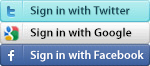
<style>
.page{position:relative;width:150px;height:66px}
.page>*{position:absolute;margin:0}
.t1{font:12px "MyriadPro-Semibold";color:#174555}
.t2{font:12px "MyriadPro-Semibold";color:#000000}
.t3{font:12px "MyriadPro-Semibold";color:#ffffff}
</style>
<div class="page">
<p class="t1" style="left:30px;top:5px;width:100px;height:12px">Sign in with Twitter</p>
<p class="t2" style="left:30px;top:27px;width:102px;height:12px">Sign in with Google</p>
<p class="t3" style="left:30px;top:50px;width:114px;height:12px">Sign in with Facebook</p>
</div>
